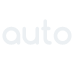
<style>
.page{position:relative;width:74px;height:68px;background:#ffffff}
.page>*{position:absolute;margin:0}
.t1{font:32.1px "Comfortaa-Bold";color:#ecf0f3}
</style>
<div class="page">
<p class="t1" style="left:2px;top:19px;width:70px;height:26px">auto</p>
</div>
